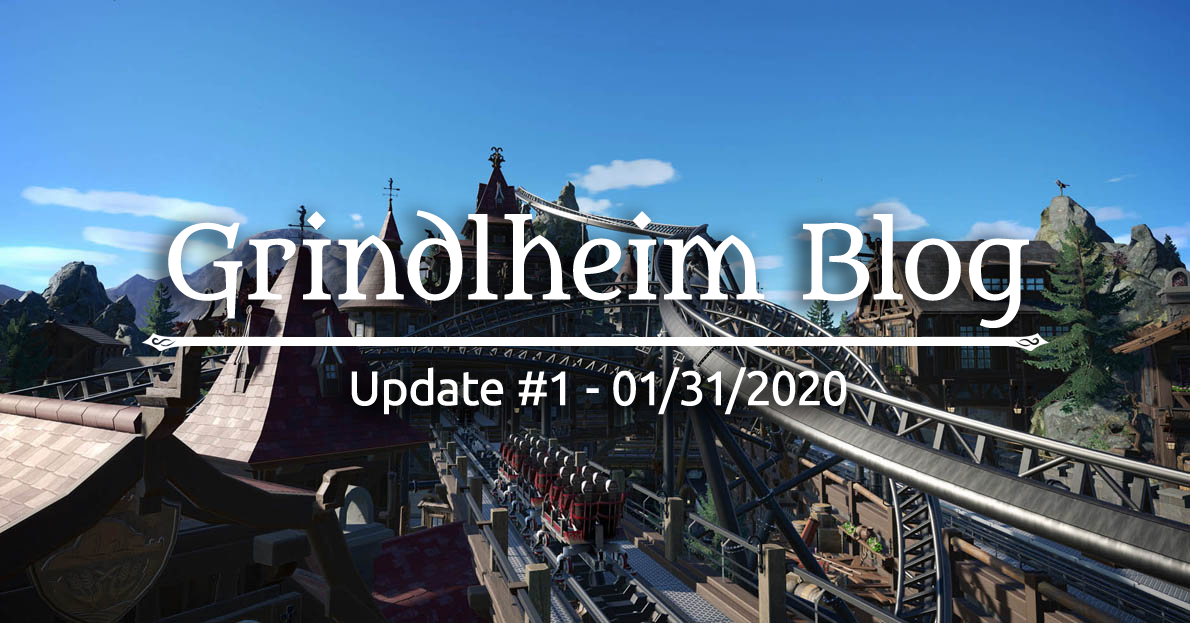
<style>
.page{position:relative;width:1190px;height:623px}
.page>*{position:absolute;margin:0}
.t1{font:100px "Metamorphous";letter-spacing:-0.025em;color:#ffffff;font-weight:bold}
.t2{font:48px "Ubuntu-Regular";letter-spacing:-0.025em;color:#ffffff;font-weight:bold}
</style>
<div class="page">
<p class="t1" style="left:168px;top:210px;width:861px;height:118px">Grindlheim Blog</p>
<p class="t2" style="left:351px;top:367px;width:496px;height:48px">Update #1 - 01/31/2020</p>
</div>
